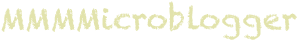
<style>
.page{position:relative;width:300px;height:42px;background:#ffffff}
.page>*{position:absolute;margin:0}
.t1{font:30px "Chalkduster";color:#e2e3ac}
</style>
<div class="page">
<p class="t1" style="left:1px;top:1px;width:296px;height:39px">MMMMicroblogger</p>
</div>
